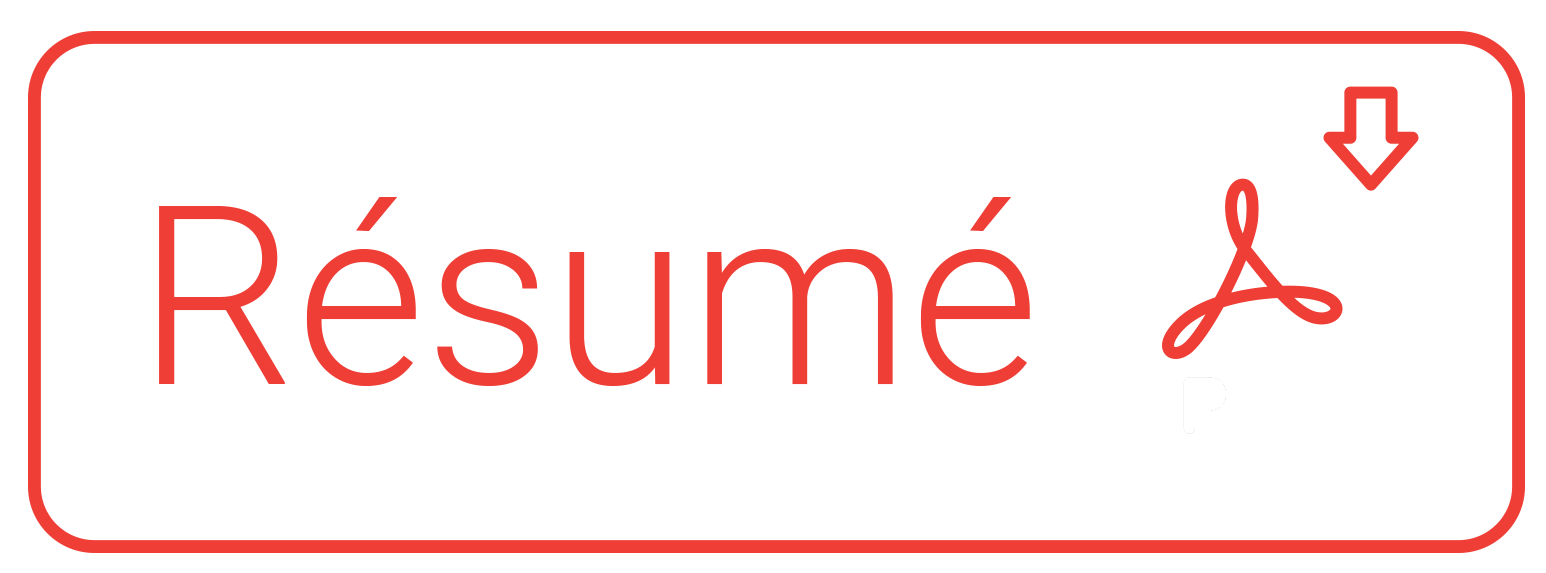
<style>
.page{position:relative;width:1546px;height:573px;background:#ffffff}
.page>*{position:absolute;margin:0}
.t1{font:250px "Roboto-Light";color:#ee3e36}
</style>
<div class="page">
<p class="t1" style="left:159px;top:197px;width:871px;height:189px">Résumé</p>
</div>
